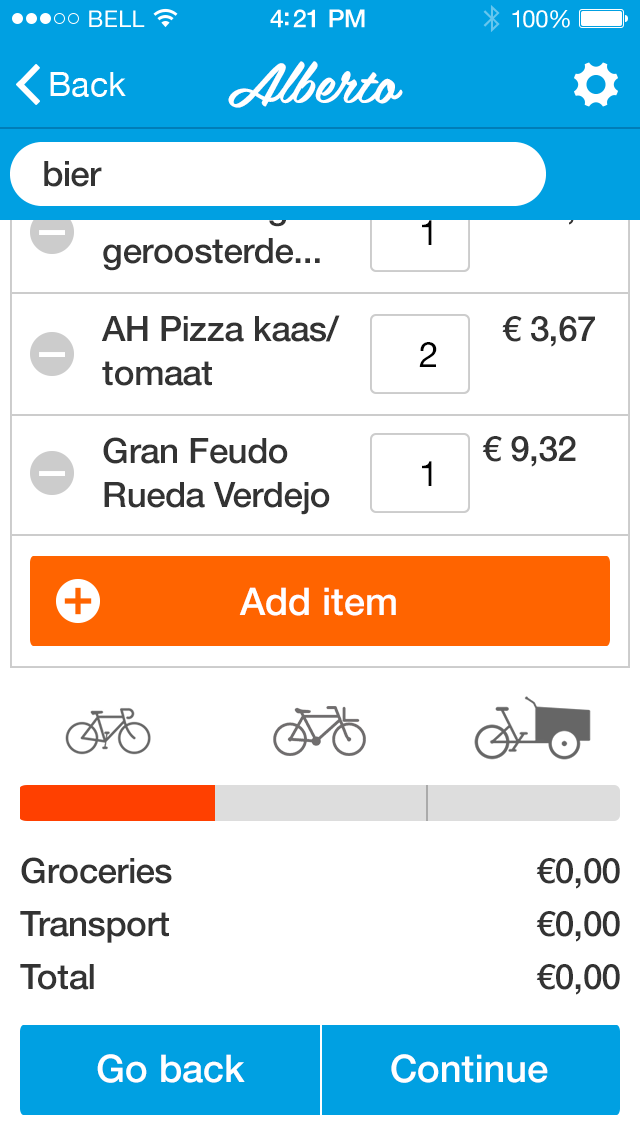
<style>
.page{position:relative;width:640px;height:1136px;background:#ffffff}
.page>*{position:absolute;margin:0}
.t1{font:56px "Belinda";color:#ffffff}
.t2{font:35px "HelveticaNeue-Medium";letter-spacing:-0.01em;color:#333333}
.t3{font:35px/44px "HelveticaNeue-Medium";letter-spacing:-0.01em}
.t4{font:35px "HelveticaNeue";letter-spacing:-0.01em;color:#000000}
.t5{font:35px/44px "HelveticaNeue-Medium";letter-spacing:-0.01em;color:#333333}
.t6{font:38px "HelveticaNeue-Medium";color:#ffffff}
.t7{font:35px/53px "HelveticaNeue-Medium";letter-spacing:-0.01em;color:#333333}
</style>
<div class="page">
<p class="t1" style="left:228px;top:61px;width:175px;height:47px">Alberto</p>
<p class="t2" style="left:44px;top:161px;width:58px;height:26px">bier</p>
<p class="t3" style="left:103px;top:194px;width:247px;height:77px">Leev Biologisch geroosterde...</p>
<p class="t4" style="left:422px;top:220px;width:10px;height:25px">1</p>
<p class="t5" style="left:101px;top:315px;width:239px;height:71px">AH Pizza kaas/ tomaat</p>
<p class="t2" style="left:502px;top:316px;width:93px;height:31px">€ 3,67</p>
<p class="t4" style="left:419px;top:342px;width:18px;height:25px">2</p>
<p class="t5" style="left:103px;top:437px;width:227px;height:78px">Gran Feudo Rueda Verdejo</p>
<p class="t2" style="left:482px;top:436px;width:94px;height:31px">€ 9,32</p>
<p class="t4" style="left:422px;top:461px;width:10px;height:25px">1</p>
<p class="t6" style="left:239px;top:587px;width:157px;height:29px">Add item</p>
<p class="t7" style="left:20px;top:857px;width:152px;height:133px">Groceries<br>Transport<br>Total</p>
<p class="t7" style="left:536px;top:858px;width:84px;height:137px">€0,00<br>€0,00<br>€0,00</p>
<p class="t6" style="left:97px;top:1054px;width:148px;height:29px">Go back</p>
<p class="t6" style="left:391px;top:1054px;width:157px;height:29px">Continue</p>
</div>
